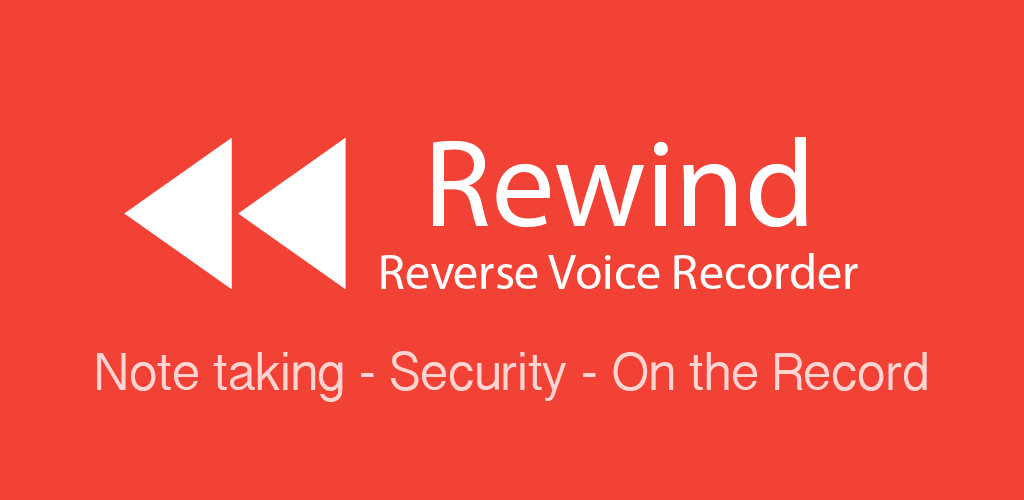
<style>
.page{position:relative;width:1024px;height:500px;background:#f24236}
.page>*{position:absolute;margin:0}
.t1{font:125px "MyriadPro-Regular";color:#ffffff}
.t2{font:12px "MyriadPro-Regular";color:#ffffff}
.t3{font:50px "KannadaSangamMN";color:#ffd4d1}
</style>
<div class="page">
<p class="t1" style="left:433px;top:137px;width:374px;height:91px">Rewind</p>
<p class="t2" style="left:381px;top:253px;width:477px;height:36px">Reverse Voice Recorder</p>
<p class="t3" style="left:97px;top:351px;width:830px;height:51px">Note taking - Security - On the Record</p>
</div>
